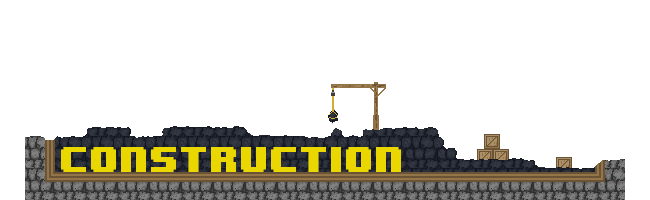
<style>
.page{position:relative;width:650px;height:200px;background:#ffffff}
.page>*{position:absolute;margin:0}
.t1{font:30px "8BITWONDERNominal";color:#ead700}
</style>
<div class="page">
<p class="t1" style="left:61px;top:147px;width:340px;height:25px">Construction</p>
</div>
